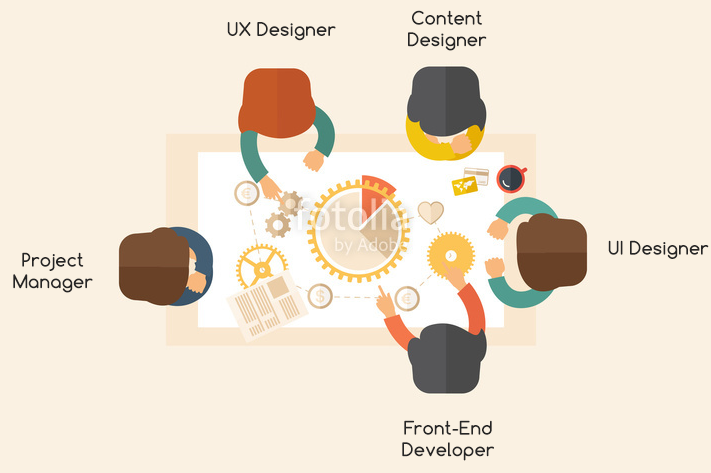
<style>
.page{position:relative;width:711px;height:473px;background:#faf1e2}
.page>*{position:absolute;margin:0}
.t1{font:18px "Comfortaa-Bold";letter-spacing:0.01em;color:#252525}
</style>
<div class="page">
<p class="t1" style="left:408px;top:10px;width:79px;height:41px;text-align:center">Content<br>Designer</p>
<p class="t1" style="left:227px;top:22px;width:109px;height:19px">UX Designer</p>
<p class="t1" style="left:608px;top:240px;width:101px;height:19px">UI Designer</p>
<p class="t1" style="left:13px;top:252px;width:80px;height:41px;text-align:center">Project<br>Manager</p>
<p class="t1" style="left:402px;top:420px;width:92px;height:41px;text-align:center">Front-End<br>Developer</p>
</div>
